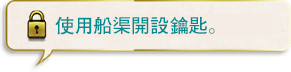
<style>
.page{position:relative;width:291px;height:72px}
.page>*{position:absolute;margin:0}
.t1{font:19px "FutoGoB101Pr5-Bold";color:#008c91}
</style>
<div class="page">
<p class="t1" style="left:55px;top:16px;width:160px;height:19px">使用船渠開設鑰匙。</p>
</div>
